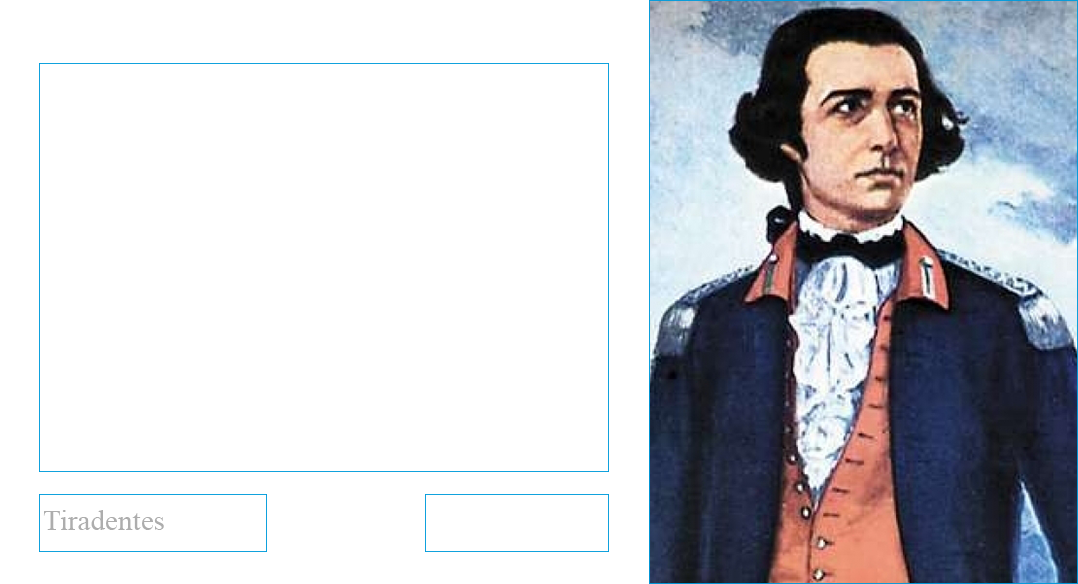
<style>
.page{position:relative;width:1078px;height:584px;background:#ffffff}
.page>*{position:absolute;margin:0}
.t1{font:29.2px "TimesNewRomanPSMT";color:#adadad}
</style>
<div class="page">
<p class="t1" style="left:43px;top:510px;width:121px;height:20px">Tiradentes</p>
</div>
